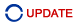
<style>
.page{position:relative;width:81px;height:26px;background:#ffffff}
.page>*{position:absolute;margin:0}
.t1{font:11.3px "ArialMT";color:#cc0000;font-weight:bold}
</style>
<div class="page">
<p class="t1" style="left:27px;top:9px;width:46px;height:9px">UPDATE</p>
</div>
